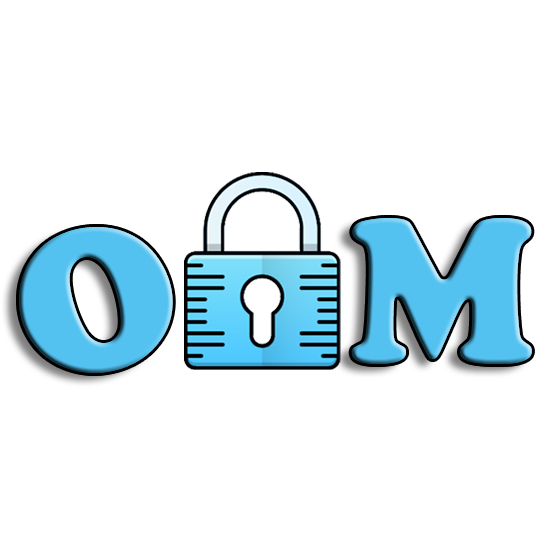
<style>
.page{position:relative;width:550px;height:550px;background:#ffffff}
.page>*{position:absolute;margin:0}
.t1{font:209.8px "CooperBlack";color:#54c2f0}
</style>
<div class="page">
<p class="t1" style="left:351px;top:218px;width:181px;height:146px">M</p>
<p class="t1" style="left:19px;top:227px;width:154px;height:146px">O</p>
</div>
